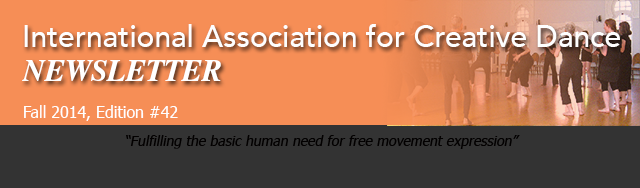
<style>
.page{position:relative;width:640px;height:188px;background:#333333}
.page>*{position:absolute;margin:0}
.t1{font:30px "Avenir-Medium";color:#fefefe}
.t2{font:30px "STIXGeneral-BoldItalic";color:#ffffff}
.t3{font:16px "Tahoma";color:#ffffff}
.t4{font:14px "Tahoma";color:#020000;font-style:italic}
</style>
<div class="page">
<p class="t1" style="left:24px;top:24px;width:596px;height:23px">International Association for Creative Dance</p>
<p class="t2" style="left:22px;top:60px;width:199px;height:21px">NEWSLETTER</p>
<p class="t3" style="left:24px;top:105px;width:154px;height:16px">Fall 2014, Edition #42</p>
<p class="t4" style="left:126px;top:135px;width:394px;height:14px">“Fulfilling the basic human need for free movement expression”</p>
</div>
